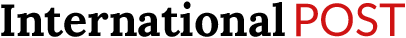
<style>
.page{position:relative;width:406px;height:38px;background:#ffffff}
.page>*{position:absolute;margin:0}
.t1{font:45px "Lora-Bold";color:#000000}
.t2{font:45px "Lato-Regular";color:#cf1313}
</style>
<div class="page">
<p class="t1" style="left:1px;top:1px;width:404px;height:36px">International <span class="t2">POST</span></p>
</div>
